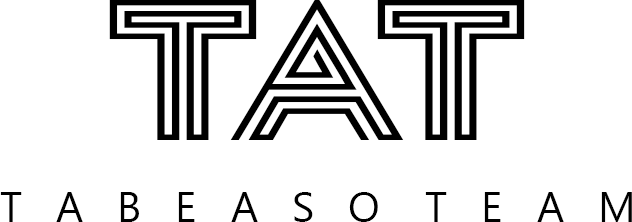
<style>
.page{position:relative;width:632px;height:222px;background:#ffffff}
.page>*{position:absolute;margin:0}
.t1{font:200px "Ico";color:#000000;scale:1.31 1}
.t2{font:41.7px "MyanmarText";color:#000000}
</style>
<div class="page">
<p class="t1" style="left:109px;top:0px;width:416px;height:140px">TAT</p>
<p class="t2" style="left:0px;top:192px;width:632px;height:30px">T   A   B   E   A   S   O    T   E   A   M</p>
</div>
